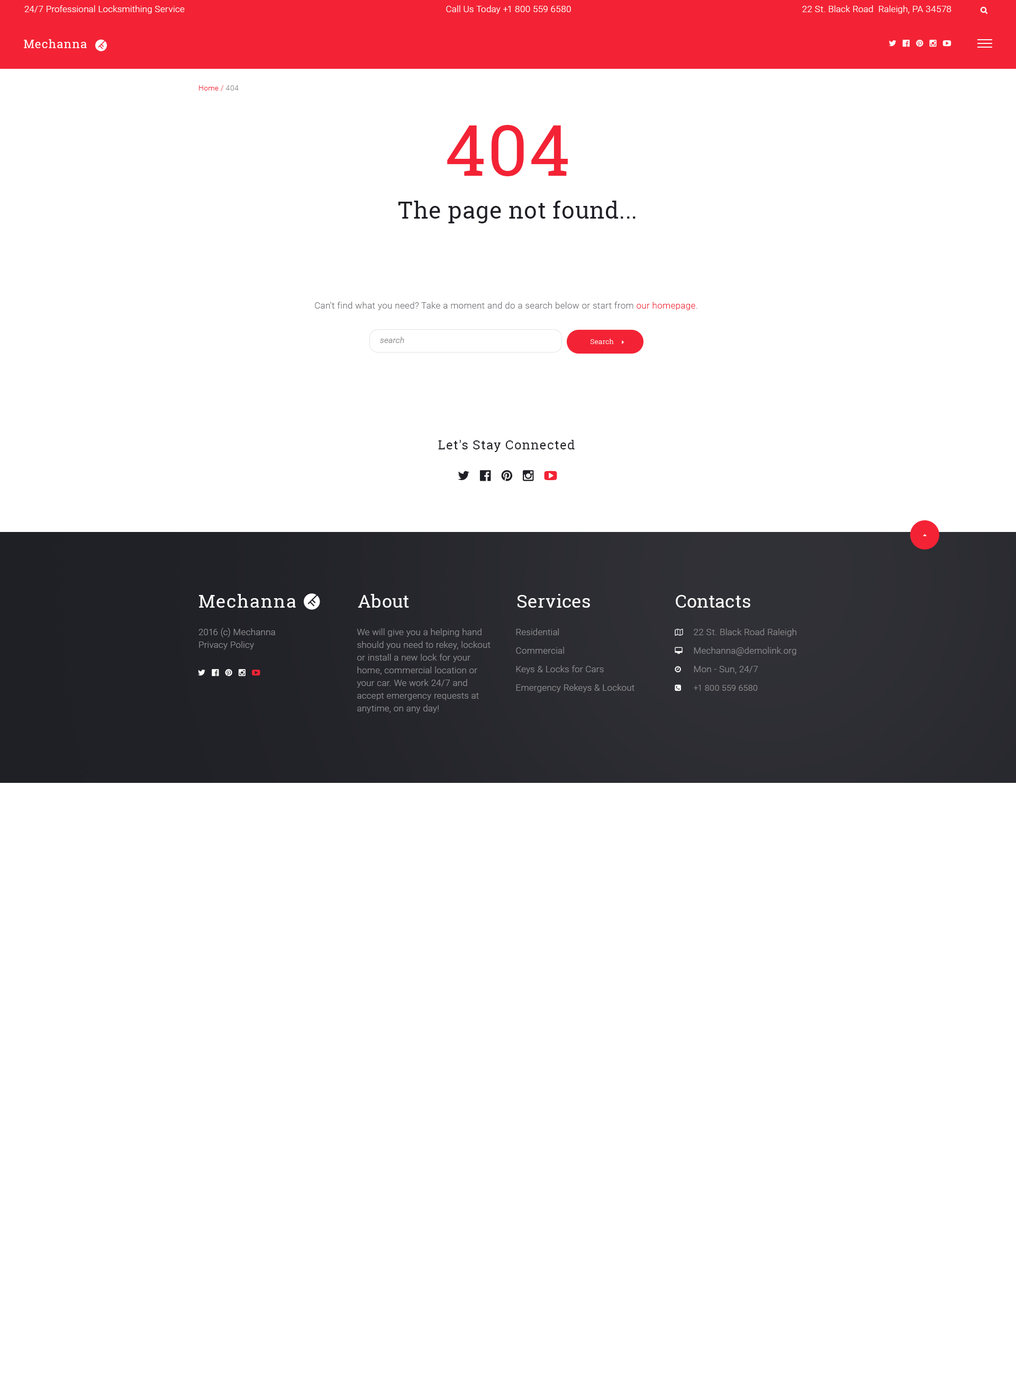
<style>
.page{position:relative;width:1016px;height:1381px;background:#ffffff}
.page>*{position:absolute;margin:0}
.t1{font:9px "Roboto-Light";letter-spacing:0.02em;color:#ffffff}
.t2{font:11.6px "RobotoSlab-Regular";letter-spacing:0.06em;color:#ffffff}
.t3{font:7.4px "Roboto-Light";letter-spacing:0.02em;color:#f32335}
.t4{font:7.4px "Roboto-Light";letter-spacing:0.02em;color:#8d8d8f}
.t5{font:70.9px "RobotoSlab-Regular";letter-spacing:0.02em;color:#f32335}
.t6{font:23.3px "RobotoSlab-Regular";letter-spacing:0.02em;color:#1f1f26}
.t7{font:9px "Roboto-Light";letter-spacing:0.02em;color:#727278}
.t8{font:9px "Roboto-Light";letter-spacing:0.02em;color:#f32335}
.t9{font:8.5px "Roboto-LightItalic";color:#818181}
.t10{font:6.9px "RobotoSlab-Light";letter-spacing:0.04em;color:#ffffff}
.t11{font:12.7px "RobotoSlab-Regular";letter-spacing:0.05em;color:#1f1f26}
.t12{font:18px "RobotoSlab-Regular";letter-spacing:0.06em;color:#ffffff}
.t13{font:18px "RobotoSlab-Regular";letter-spacing:0.02em;color:#ffffff}
.t14{font:9px/12.7px "Roboto-Light";letter-spacing:0.02em;color:#8d8d8f}
.t15{font:9px/18.5px "Roboto-Light";letter-spacing:0.02em;color:#8d8d8f}
.t16{font:8.5px/18.5px "Roboto-Light";letter-spacing:0.02em;color:#8d8d8f}
</style>
<div class="page">
<p class="t1" style="left:24px;top:5px;width:161px;height:9px">24/7 Professional Locksmithing Service</p>
<p class="t1" style="left:446px;top:5px;width:125px;height:9px">Call Us Today +1 800 559 6580</p>
<p class="t1" style="left:803px;top:5px;width:149px;height:9px">22 St. Black Road  Raleigh, PA 34578</p>
<p class="t2" style="left:24px;top:39px;width:63px;height:9px">Mechanna</p>
<p class="t3" style="left:199px;top:85px;width:40px;height:6px">Home /<span class="t4"> 404</span></p>
<p class="t5" style="left:447px;top:125px;width:121px;height:51px">404</p>
<p class="t6" style="left:398px;top:201px;width:238px;height:22px">The page not found...</p>
<p class="t7" style="left:315px;top:302px;width:383px;height:8px">Can't find what you need? Take a moment and do a search below or start from <span class="t8">our homepage</span>.</p>
<p class="t9" style="left:380px;top:337px;width:24px;height:6px">search</p>
<p class="t10" style="left:591px;top:339px;width:23px;height:5px">Search</p>
<p class="t11" style="left:438px;top:440px;width:137px;height:12px">Let's Stay Connected</p>
<p class="t12" style="left:199px;top:594px;width:97px;height:14px">Mechanna</p>
<p class="t13" style="left:358px;top:594px;width:51px;height:14px">About</p>
<p class="t13" style="left:518px;top:594px;width:72px;height:14px">Services</p>
<p class="t13" style="left:676px;top:595px;width:75px;height:13px">Contacts</p>
<p class="t14" style="left:199px;top:628px;width:76px;height:22px">2016 (с) Mechanna<br>Privacy Policy</p>
<p class="t14" style="left:357px;top:628px;width:134px;height:85px">We will give you a helping hand should you need to rekey, lockout or install a new lock for your home, commercial location or your car. We work 24/7 and accept emergency requests at anytime, on any day!</p>
<p class="t15" style="left:516px;top:628px;width:119px;height:64px">Residential  <br>Commercial <br>Keys &amp; Locks for Cars <br>Emergency Rekeys &amp; Lockout</p>
<p class="t15" style="left:694px;top:628px;width:103px;height:63px">22 St. Black Road Raleigh<br>Mechanna@demolink.org<br>Mon - Sun, 24/7<br><span class="t16">+1 800 559 6580</span></p>
</div>
